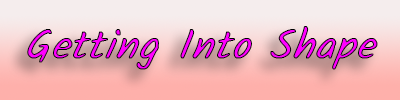
<style>
.page{position:relative;width:400px;height:100px}
.page>*{position:absolute;margin:0}
.t1{font:41.1px "Kalam-Regular";font-weight:bold;font-style:italic}
</style>
<div class="page">
<p class="t1" style="left:27px;top:26px;width:351px;height:44px">Getting Into Shape</p>
</div>
